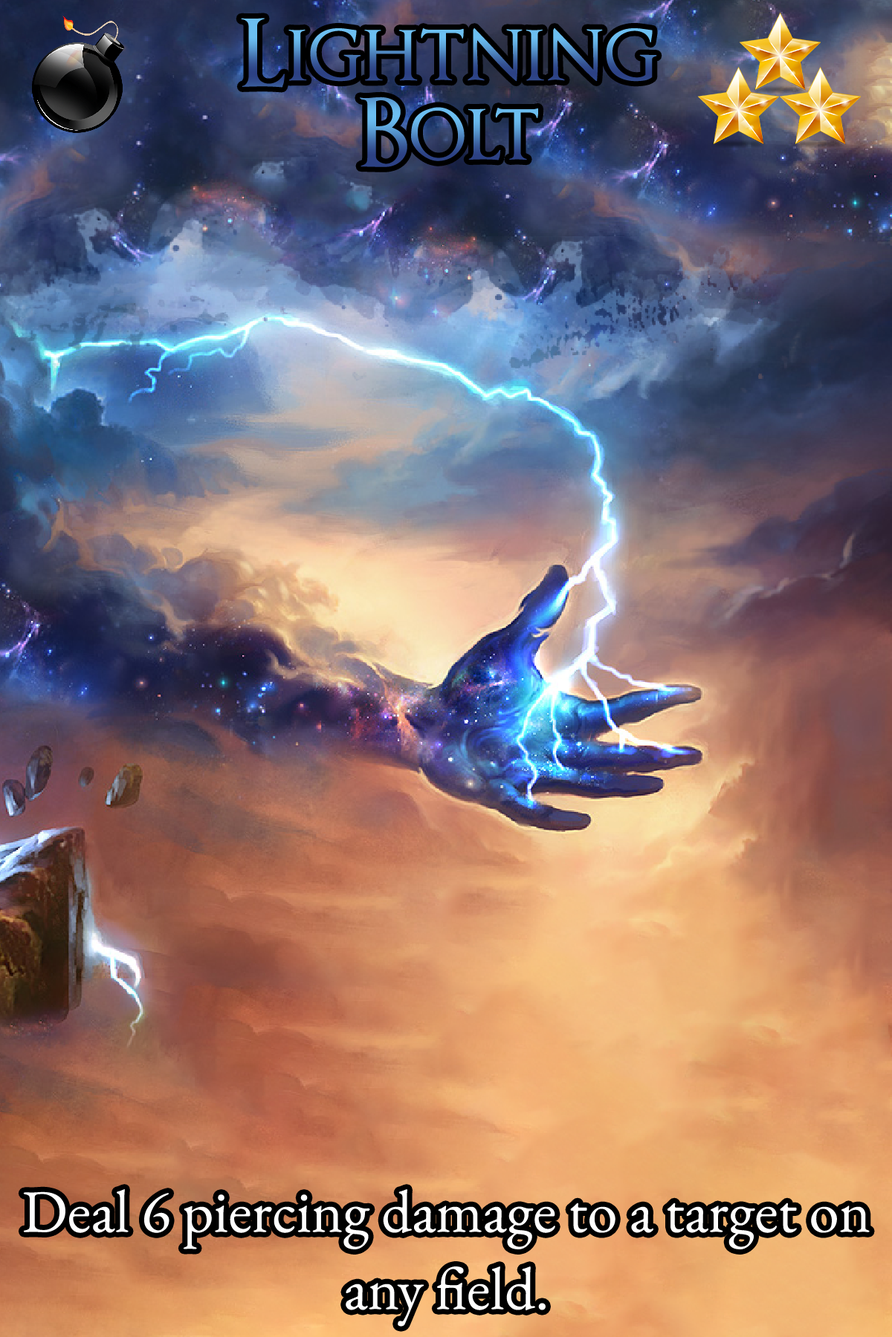
<style>
.page{position:relative;width:892px;height:1337px}
.page>*{position:absolute;margin:0}
.t1{font:159px/79.5px "OptimusPrinceps"}
.t2{font:103.3px "EBGaramond-Regular";color:#ffffff}
</style>
<div class="page">
<p class="t1" style="left:241px;top:18px;width:416px;height:149px;text-align:center">Lightning<br>Bolt</p>
<p class="t2" style="left:23px;top:1190px;width:846px;height:137px">Deal 6 piercing damage to a target on any field.</p>
</div>
